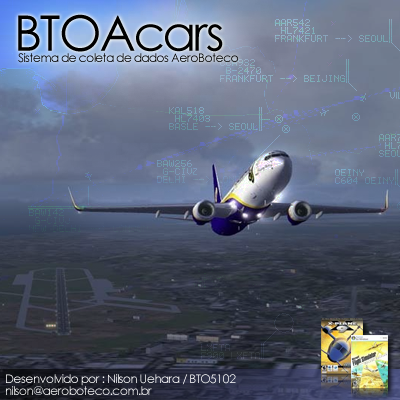
<style>
.page{position:relative;width:400px;height:400px}
.page>*{position:absolute;margin:0}
.t1{font:48.9px "CenturyGothic";letter-spacing:-0.04em;color:#000000}
.t2{font:12px "CenturyGothic";letter-spacing:-0.04em;color:#000000}
.t3{font:12px "CenturyGothic";letter-spacing:-0.04em;color:#ffffff}
</style>
<div class="page">
<p class="t1" style="left:18px;top:14px;width:205px;height:38px">BTOAcars</p>
<p class="t2" style="left:18px;top:53px;width:220px;height:10px">Sistema de coleta de dados AeroBoteco</p>
<p class="t3" style="left:6px;top:374px;width:230px;height:12px">Desenvolvido por : Nilson Uehara / BTO5102</p>
<p class="t3" style="left:6px;top:386px;width:146px;height:9px;opacity:0.95">nilson@aeroboteco.com.br</p>
</div>
